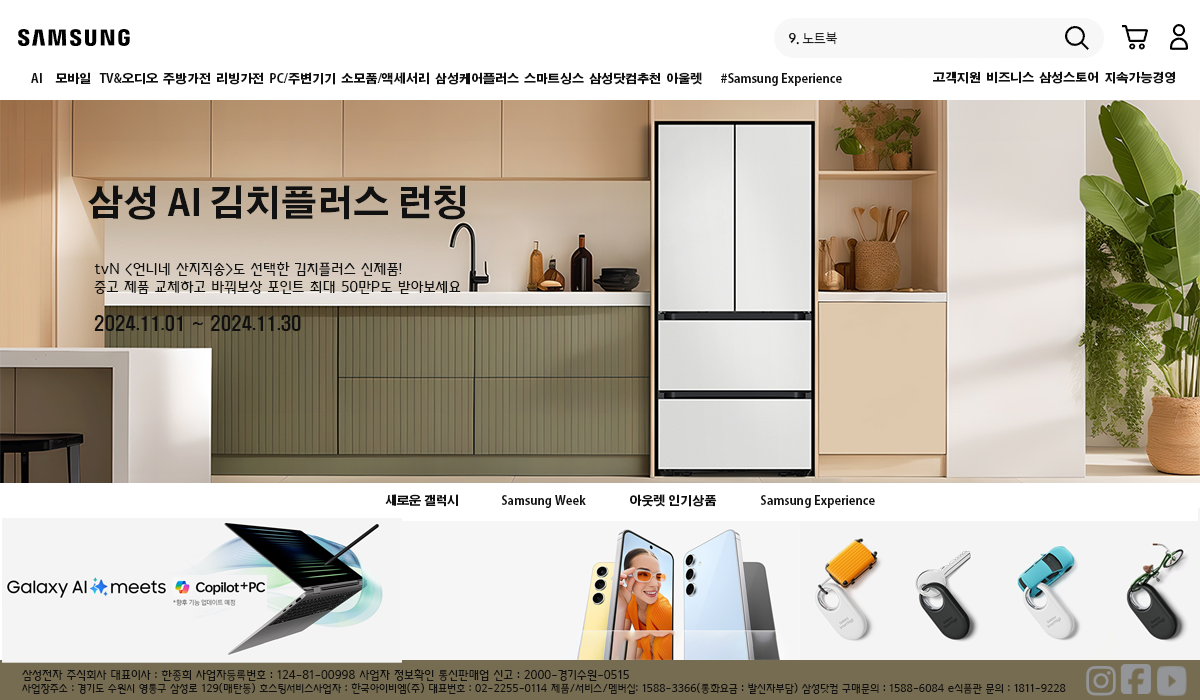
<style>
.page{position:relative;width:1200px;height:700px}
.page>*{position:absolute;margin:0}
.t1{font:12px "AdobeGothicStd-Bold";color:#111111}
.t2{font:36px "AdobeGothicStd-Bold";color:#111111}
.t3{font:15px "KBIZgo_R";color:#111111}
.t4{font:18px "H2hdrM";color:#111111}
.t5{font:11px "KBIZgo_R";color:#111111}
.t6{font:12px "KBIZgo_R";color:#111111}
</style>
<div class="page">
<p class="t1" style="left:31px;top:72px;width:811px;height:14px">AI     모바일   TV&amp;오디오  주방가전  리빙가전  PC/주변기기  소모품/액세서리  삼성케어플러스  스마트싱스  삼성닷컴추천  아울렛       #Samsung Experience</p>
<p class="t1" style="left:933px;top:71px;width:242px;height:13px">고객지원  비즈니스  삼성스토어  지속가능경영</p>
<p class="t2" style="left:88px;top:185px;width:378px;height:35px">삼성 AI 김치플러스 런칭</p>
<p class="t3" style="left:94px;top:262px;width:367px;height:69px">tvN &lt;언니네 산지직송&gt;도 선택한 김치플러스 신제품!<br>중고 제품 교체하고 바꿔보상 포인트 최대 50만P도 받아보세요<br><br><span class="t4">2024.11.01 ~ 2024.11.30</span></p>
<p class="t1" style="left:385px;top:494px;width:490px;height:14px">새로운 갤럭시                Samsung Week                 아웃렛 인기상품                 Samsung Experience</p>
<p class="t5" style="left:22px;top:669px;width:1044px;height:25px"><span class="t6">삼성전자 주식회사 대표이사 : 한종희 사업자등록번호 : 124-81-00998 사업자 정보확인 통신판매업 신고 : 2000-경기수원-0515<br></span>사업장주소 : 경기도 수원시 영통구 삼성로 129(매탄동) 호스팅서비스사업자 : 한국아이비엠(주) 대표번호 : 02-2255-0114 제품/서비스/멤버십: 1588-3366(통화요금 : 발신자부담) 삼성닷컴 구매문의 : 1588-6084 e식품관 문의 : 1811-9228</p>
</div>
